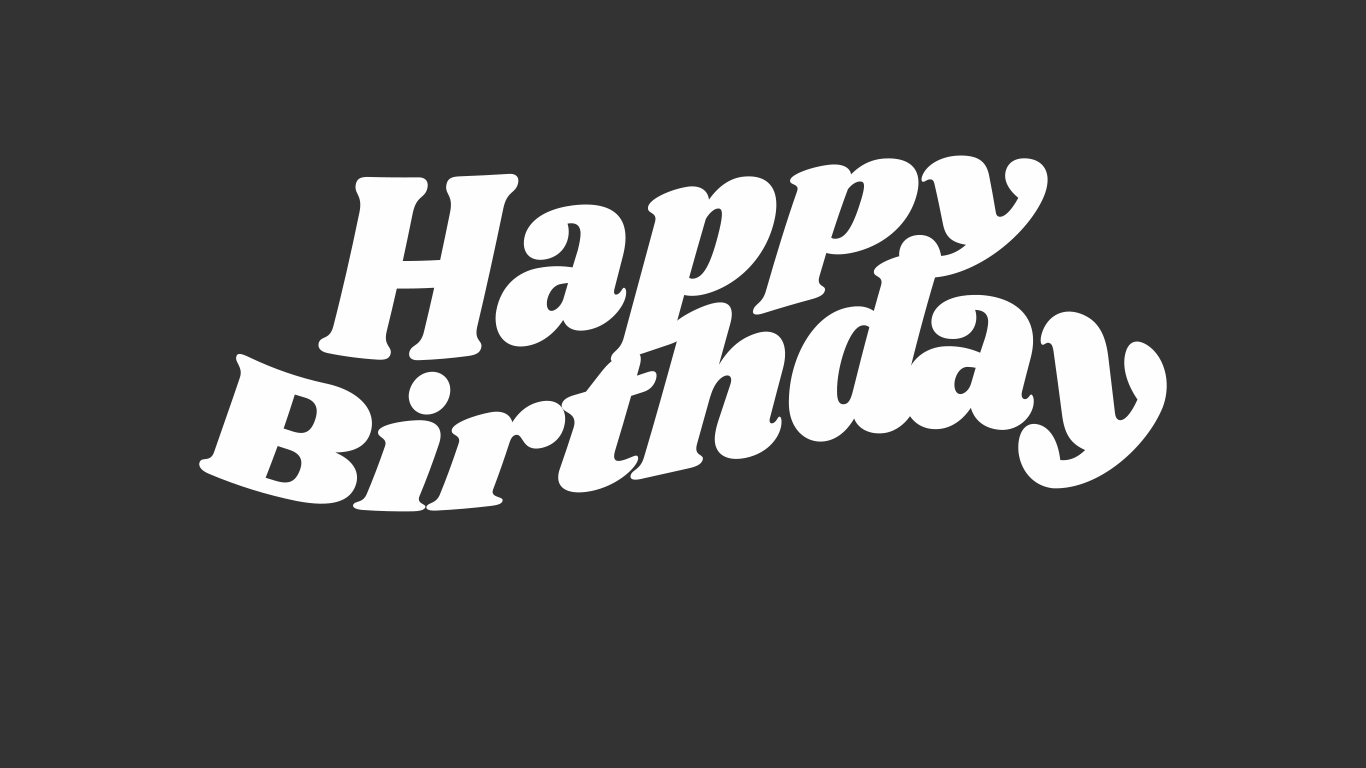
<style>
.page{position:relative;width:1366px;height:768px;background:#333333}
.page>*{position:absolute;margin:0}
.t1{font:211.8px/170px "Shrikhand-Regular";letter-spacing:-0.02em;color:#fefefe}
</style>
<div class="page">
<p class="t1" style="left:199px;top:155px;width:968px;height:357px;text-align:center">Happy<br>Birthday</p>
</div>
